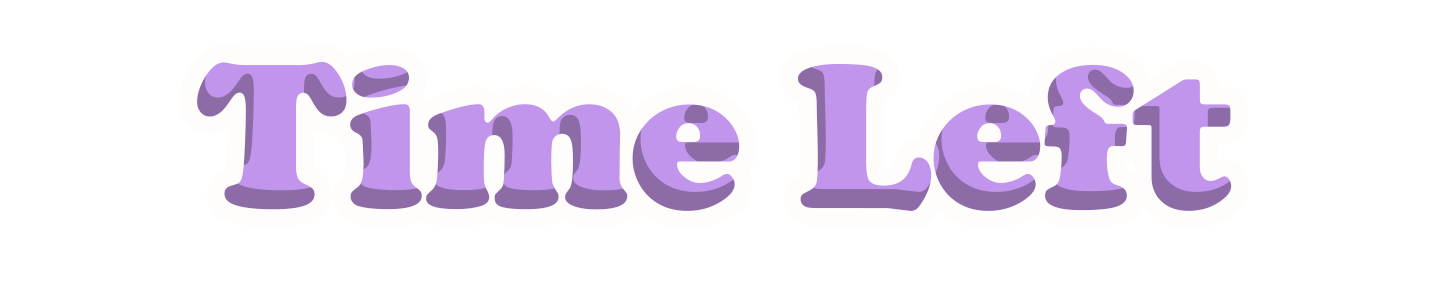
<style>
.page{position:relative;width:1430px;height:295px;background:#ffffff}
.page>*{position:absolute;margin:0}
.t1{font:213px "CooperBlack";color:#c295ec}
</style>
<div class="page">
<p class="t1" style="left:197px;top:61px;width:1035px;height:150px">Time Left</p>
</div>
